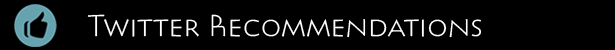
<style>
.page{position:relative;width:615px;height:50px;background:#000000}
.page>*{position:absolute;margin:0}
.t1{font:27.7px "Pericles-Light";color:#ffffff}
</style>
<div class="page">
<p class="t1" style="left:87px;top:14px;width:395px;height:24px">Twitter Recommendations</p>
</div>
